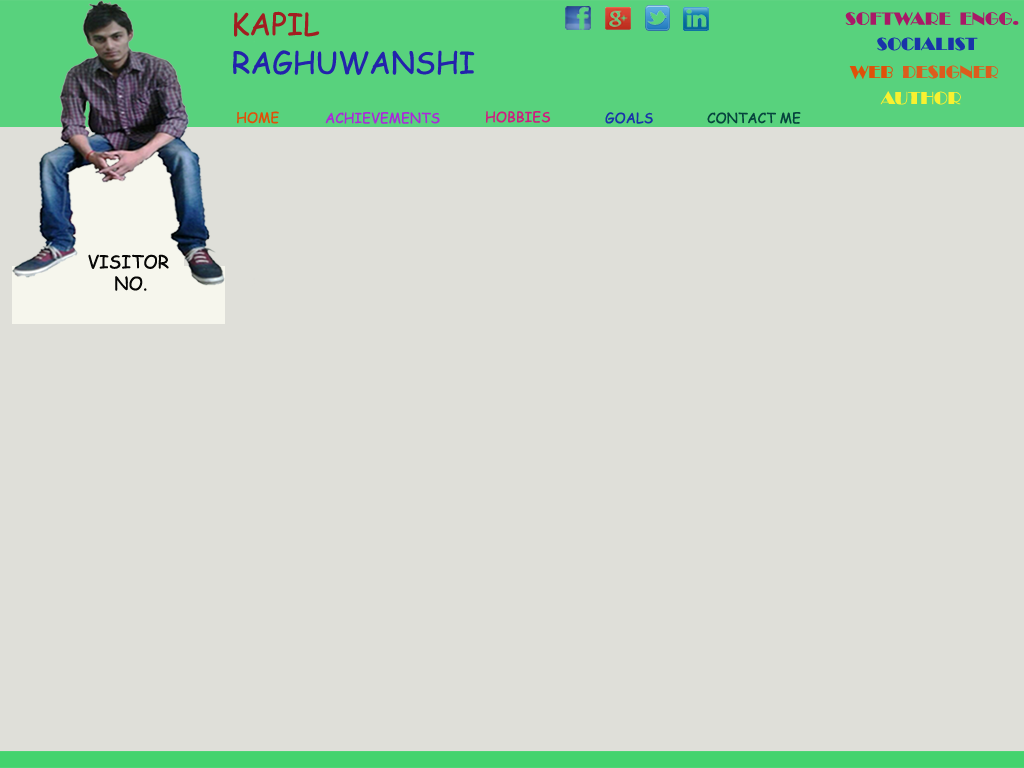
<style>
.page{position:relative;width:1024px;height:768px;background:#dfdfd9}
.page>*{position:absolute;margin:0}
.t1{font:30px "ComicSansMS";color:#a21e21}
.t2{font:30px "CalifornianFB-Reg";color:#a21e21}
.t3{font:18px "Broadway";color:#a91967}
.t4{font:18px "Broadway";color:#1934a9}
.t5{font:30px "ComicSansMS";color:#2323ac}
.t6{font:18px "Broadway";color:#dc5c1d}
.t7{font:18px "Broadway";color:#e05009}
.t8{font:18px "Broadway";color:#f8f130}
.t9{font:14px "ComicSansMS";color:#aa2ad9}
.t10{font:14px "ComicSansMS";color:#d01d7e}
.t11{font:14px "ComicSansMS";color:#1934a9}
.t12{font:14px "ComicSansMS";color:#06453d}
.t13{font:18px "ComicSansMS";color:#060605}
</style>
<div class="page">
<p class="t1" style="left:234px;top:11px;width:86px;height:26px"><span class="t2"> </span>KAPIL</p>
<p class="t3" style="left:845px;top:11px;width:174px;height:15px">SOFTWARE  ENGG.</p>
<p class="t4" style="left:877px;top:37px;width:101px;height:14px">SOCIALIST</p>
<p class="t5" style="left:233px;top:50px;width:242px;height:25px">RAGHUWANSHI</p>
<p class="t6" style="left:849px;top:65px;width:150px;height:14px"><span class="t7">WEB</span>  DESIGNER</p>
<p class="t8" style="left:880px;top:91px;width:81px;height:14px">AUTHOR</p>
<p class="t9" style="left:325px;top:112px;width:115px;height:12px">ACHIEVEMENTS</p>
<p class="t10" style="left:486px;top:111px;width:65px;height:12px">HOBBIES</p>
<p class="t11" style="left:605px;top:112px;width:48px;height:12px">GOALS</p>
<p class="t12" style="left:707px;top:112px;width:94px;height:12px">CONTACT ME</p>
<p class="t13" style="left:88px;top:254px;width:81px;height:37px">VISITOR <br>     NO.</p>
</div>
